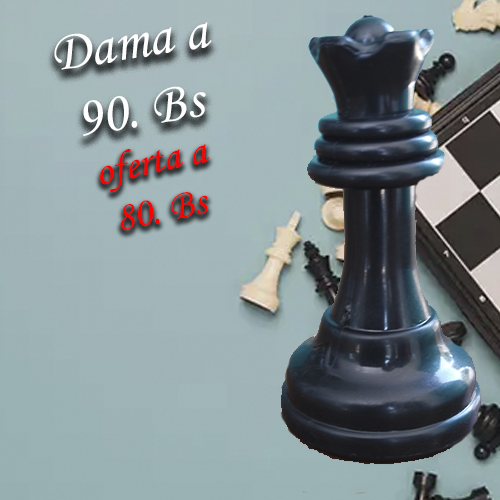
<style>
.page{position:relative;width:500px;height:500px}
.page>*{position:absolute;margin:0}
.t1{font:56.8px "MonotypeCorsiva";color:#fffefe}
.t2{font:41.2px "MonotypeCorsiva";color:#ff0000}
</style>
<div class="page">
<p class="t1" style="left:54px;top:22px;width:158px;height:114px;text-align:center;rotate:-9deg">Dama a<br>90. Bs</p>
<p class="t2" style="left:100px;top:144px;width:110px;height:86px;text-align:center;rotate:-12deg">oferta a<br>80. Bs</p>
</div>
